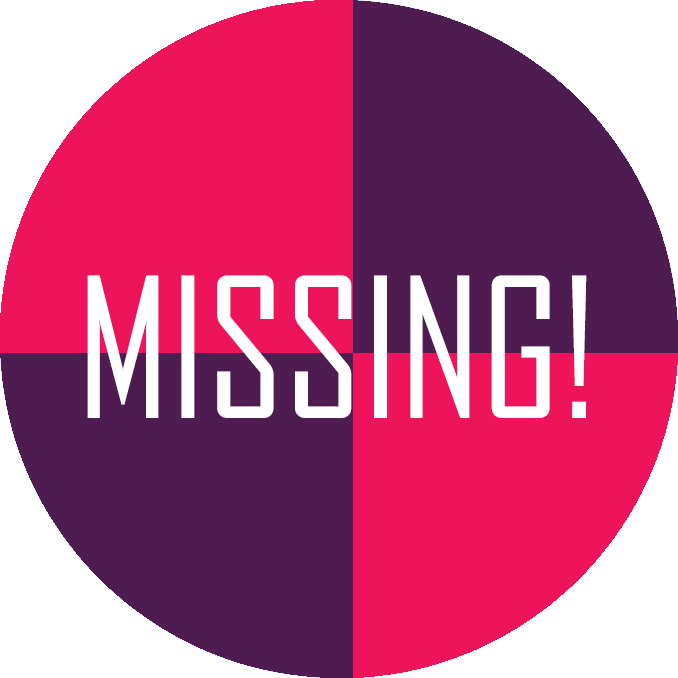
<style>
.page{position:relative;width:678px;height:678px;background:#ed145b}
.page>*{position:absolute;margin:0}
.t1{font:186.1px "AgencyFB-Reg";color:#ffffff}
</style>
<div class="page">
<p class="t1" style="left:87px;top:275px;width:500px;height:143px">MISSING!</p>
</div>
